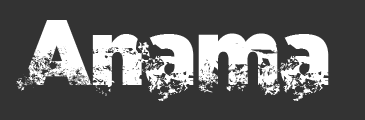
<style>
.page{position:relative;width:365px;height:120px;background:#333333}
.page>*{position:absolute;margin:0}
.t1{font:85.2px "C.A.Gatintas";color:#fefefe}
</style>
<div class="page">
<p class="t1" style="left:16px;top:20px;width:313px;height:81px">Anama</p>
</div>
